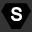
<style>
.page{position:relative;width:32px;height:32px;background:#333333}
.page>*{position:absolute;margin:0}
.t1{font:18px "ArialMT";color:#ffffff;font-weight:bold}
</style>
<div class="page">
<p class="t1" style="left:11px;top:7px;width:11px;height:14px">S</p>
</div>
